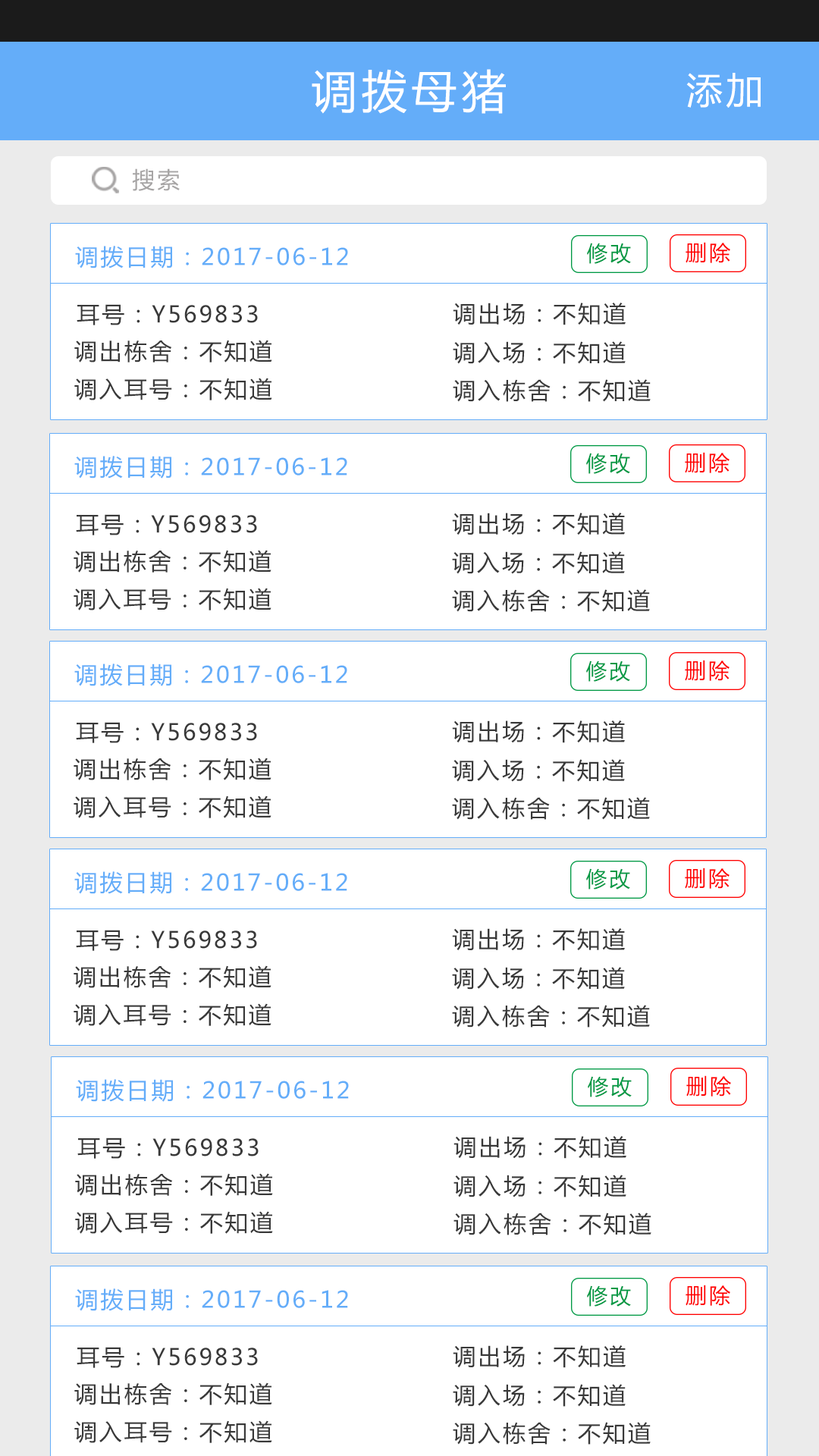
<style>
.page{position:relative;width:819px;height:1456px;background:#ffffff}
.page>*{position:absolute;margin:0}
.t1{font:45.5px "MicrosoftYaHei";letter-spacing:0.1em;color:#ffffff}
.t2{font:36.4px "MicrosoftYaHei";letter-spacing:0.1em;color:#ffffff}
.t3{font:22.7px "MicrosoftYaHei";letter-spacing:0.1em;color:#a7a5a5}
.t4{font:22.9px "MicrosoftYaHei";letter-spacing:0.1em;color:#64adf9}
.t5{font:21.2px "MicrosoftYaHei";letter-spacing:0.1em;color:#009944}
.t6{font:21.2px "MicrosoftYaHei";letter-spacing:0.1em;color:#ff0000}
.t7{font:22.7px "MicrosoftYaHei";letter-spacing:0.1em;color:#393939}
</style>
<div class="page">
<p class="t1" style="left:312px;top:69px;width:194px;height:45px">调拨母猪</p>
<p class="t2" style="left:686px;top:73px;width:75px;height:35px">添加</p>
<p class="t3" style="left:132px;top:168px;width:48px;height:23px">搜索</p>
<p class="t4" style="left:75px;top:246px;width:273px;height:22px">调拨日期：2017-06-12</p>
<p class="t5" style="left:587px;top:243px;width:44px;height:21px">修改</p>
<p class="t6" style="left:686px;top:242px;width:44px;height:21px">删除</p>
<p class="t7" style="left:77px;top:304px;width:181px;height:21px">耳号：Y569833</p>
<p class="t7" style="left:453px;top:303px;width:173px;height:22px">调出场：不知道</p>
<p class="t7" style="left:74px;top:340px;width:198px;height:22px">调出栋舍：不知道</p>
<p class="t7" style="left:453px;top:341px;width:173px;height:23px">调入场：不知道</p>
<p class="t7" style="left:74px;top:378px;width:198px;height:22px">调入耳号：不知道</p>
<p class="t7" style="left:453px;top:379px;width:198px;height:23px">调入栋舍：不知道</p>
<p class="t4" style="left:74px;top:456px;width:273px;height:23px">调拨日期：2017-06-12</p>
<p class="t5" style="left:586px;top:453px;width:44px;height:21px">修改</p>
<p class="t6" style="left:685px;top:452px;width:45px;height:21px">删除</p>
<p class="t7" style="left:76px;top:514px;width:181px;height:21px">耳号：Y569833</p>
<p class="t7" style="left:452px;top:513px;width:173px;height:22px">调出场：不知道</p>
<p class="t7" style="left:74px;top:550px;width:197px;height:23px">调出栋舍：不知道</p>
<p class="t7" style="left:452px;top:551px;width:173px;height:23px">调入场：不知道</p>
<p class="t7" style="left:74px;top:588px;width:197px;height:22px">调入耳号：不知道</p>
<p class="t7" style="left:452px;top:589px;width:198px;height:23px">调入栋舍：不知道</p>
<p class="t4" style="left:74px;top:664px;width:273px;height:22px">调拨日期：2017-06-12</p>
<p class="t5" style="left:586px;top:660px;width:44px;height:22px">修改</p>
<p class="t6" style="left:685px;top:660px;width:45px;height:21px">删除</p>
<p class="t7" style="left:76px;top:722px;width:181px;height:21px">耳号：Y569833</p>
<p class="t7" style="left:452px;top:720px;width:173px;height:23px">调出场：不知道</p>
<p class="t7" style="left:74px;top:758px;width:197px;height:22px">调出栋舍：不知道</p>
<p class="t7" style="left:452px;top:759px;width:173px;height:23px">调入场：不知道</p>
<p class="t7" style="left:74px;top:795px;width:197px;height:23px">调入耳号：不知道</p>
<p class="t7" style="left:452px;top:797px;width:198px;height:23px">调入栋舍：不知道</p>
<p class="t5" style="left:586px;top:868px;width:44px;height:22px">修改</p>
<p class="t6" style="left:685px;top:868px;width:45px;height:21px">删除</p>
<p class="t4" style="left:74px;top:871px;width:273px;height:23px">调拨日期：2017-06-12</p>
<p class="t7" style="left:76px;top:930px;width:181px;height:21px">耳号：Y569833</p>
<p class="t7" style="left:452px;top:928px;width:173px;height:23px">调出场：不知道</p>
<p class="t7" style="left:74px;top:965px;width:197px;height:23px">调出栋舍：不知道</p>
<p class="t7" style="left:452px;top:967px;width:173px;height:23px">调入场：不知道</p>
<p class="t7" style="left:74px;top:1003px;width:197px;height:23px">调入耳号：不知道</p>
<p class="t7" style="left:452px;top:1005px;width:198px;height:23px">调入栋舍：不知道</p>
<p class="t4" style="left:76px;top:1079px;width:273px;height:23px">调拨日期：2017-06-12</p>
<p class="t5" style="left:588px;top:1076px;width:44px;height:21px">修改</p>
<p class="t6" style="left:686px;top:1075px;width:45px;height:22px">删除</p>
<p class="t7" style="left:77px;top:1137px;width:182px;height:22px">耳号：Y569833</p>
<p class="t7" style="left:453px;top:1136px;width:173px;height:23px">调出场：不知道</p>
<p class="t7" style="left:75px;top:1173px;width:198px;height:23px">调出栋舍：不知道</p>
<p class="t7" style="left:453px;top:1175px;width:173px;height:22px">调入场：不知道</p>
<p class="t7" style="left:75px;top:1211px;width:198px;height:23px">调入耳号：不知道</p>
<p class="t7" style="left:453px;top:1213px;width:198px;height:22px">调入栋舍：不知道</p>
<p class="t4" style="left:75px;top:1288px;width:273px;height:23px">调拨日期：2017-06-12</p>
<p class="t5" style="left:587px;top:1285px;width:44px;height:22px">修改</p>
<p class="t6" style="left:686px;top:1285px;width:44px;height:21px">删除</p>
<p class="t7" style="left:77px;top:1347px;width:181px;height:21px">耳号：Y569833</p>
<p class="t7" style="left:453px;top:1345px;width:173px;height:23px">调出场：不知道</p>
<p class="t7" style="left:74px;top:1382px;width:198px;height:23px">调出栋舍：不知道</p>
<p class="t7" style="left:453px;top:1384px;width:173px;height:23px">调入场：不知道</p>
<p class="t7" style="left:74px;top:1420px;width:198px;height:23px">调入耳号：不知道</p>
<p class="t7" style="left:453px;top:1422px;width:198px;height:23px">调入栋舍：不知道</p>
</div>
